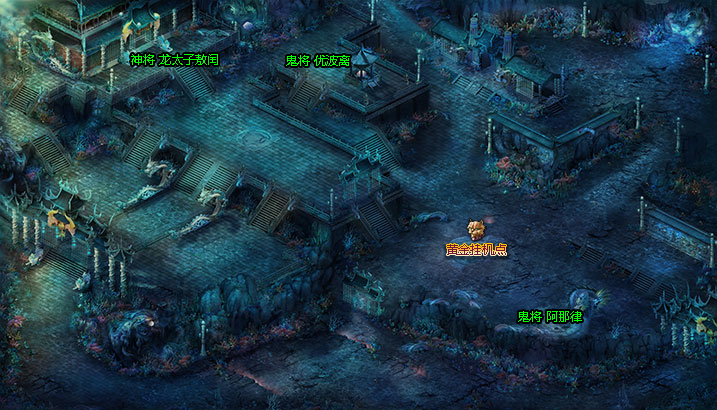
<style>
.page{position:relative;width:717px;height:410px}
.page>*{position:absolute;margin:0}
.t1{font:12px "MicrosoftYaHei";color:#00ff00}
.t2{font:12px "MicrosoftYaHei";color:#701633}
</style>
<div class="page">
<p class="t1" style="left:131px;top:54px;width:87px;height:11px">神将 龙太子敖闰</p>
<p class="t1" style="left:286px;top:55px;width:64px;height:11px">鬼将 优波离</p>
<p class="t2" style="left:447px;top:244px;width:59px;height:11px">黄金挂机点</p>
<p class="t1" style="left:518px;top:311px;width:64px;height:11px">鬼将 阿那律</p>
</div>
